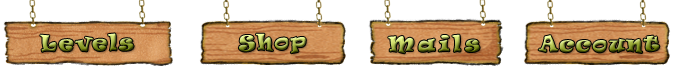
<style>
.page{position:relative;width:689px;height:77px;background:#ffffff}
.page>*{position:absolute;margin:0}
.t1{font:20px "Ravie";letter-spacing:0.1em}
.t2{font:20px "Ravie";letter-spacing:0.2em}
</style>
<div class="page">
<p class="t1" style="left:40px;top:33px;width:94px;height:19px;rotate:-1deg">Levels</p>
<p class="t1" style="left:238px;top:33px;width:68px;height:21px;rotate:-3deg">Shop</p>
<p class="t2" style="left:388px;top:34px;width:92px;height:20px">Mails</p>
<p class="t1" style="left:538px;top:35px;width:122px;height:18px">Account</p>
</div>
